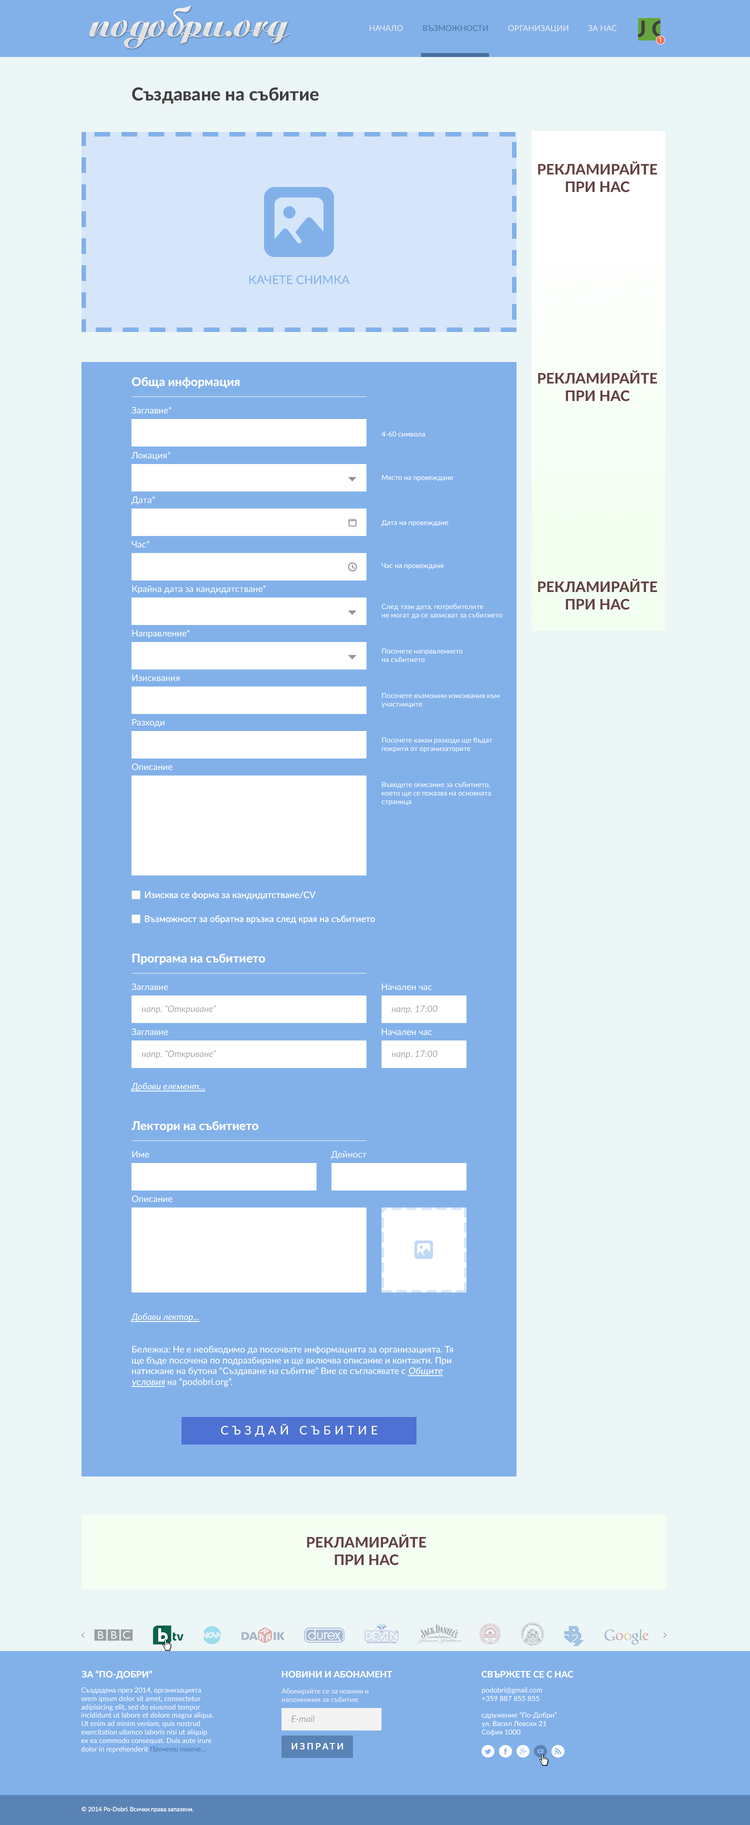
<style>
.page{position:relative;width:750px;height:1825px;background:#edf6f6}
.page>*{position:absolute;margin:0}
.t1{font:22.5px "Lato-Heavy"}
.t2{font:7.7px "ArialMT";color:#ffffff}
.t3{font:18px "Lato-Heavy";color:#404040}
.t4{font:14.5px "Lato-Heavy";color:#654242}
.t5{font:12px "Lato-Medium";color:#82b1ea}
.t6{font:12px "Lato-Heavy";color:#ffffff}
.t7{font:9px "Lato-Regular";color:#ffffff}
.t8{font:7px "Lato-Medium";color:#ffffff}
.t9{font:7px "Lato-Regular";color:#ffffff}
.t10{font:9px "Lato-Medium";color:#ffffff}
.t11{font:9px "Lato-Italic";color:#a6a6a6}
.t12{font:9px "Lato-Italic";color:#ffffff;text-decoration:underline}
.t13{font:9px "Lato-Medium";color:#ffffff;font-style:italic;text-decoration:underline}
.t14{font:12px "Lato-Medium";letter-spacing:0.3em;color:#ffffff}
</style>
<div class="page">
<p class="t1" style="left:631px;top:20px;width:38px;height:17px">U O</p>
<p class="t2" style="left:659px;top:36px;width:2px;height:6px">1</p>
<p class="t3" style="left:132px;top:87px;width:187px;height:17px">Създаване на събитие</p>
<p class="t4" style="left:538px;top:161px;width:119px;height:449px;text-align:center">РЕКЛАМИРАЙТЕ <br>ПРИ НАС<br><br><br><br><br><br><br><br><br><br><br>РЕКЛАМИРАЙТЕ <br>ПРИ НАС<br><br><br><br><br><br><br><br><br><br><br>РЕКЛАМИРАЙТЕ <br>ПРИ НАС</p>
<p class="t5" style="left:249px;top:275px;width:101px;height:9px">КАЧЕТЕ СНИМКА</p>
<p class="t6" style="left:131px;top:377px;width:108px;height:11px">Обща информация</p>
<p class="t7" style="left:131px;top:406px;width:40px;height:8px">Заглавие*</p>
<p class="t8" style="left:381px;top:431px;width:44px;height:5px">4-60 символа</p>
<p class="t7" style="left:131px;top:451px;width:39px;height:9px">Локация*</p>
<p class="t8" style="left:382px;top:475px;width:71px;height:6px">Място на провеждане</p>
<p class="t7" style="left:131px;top:496px;width:24px;height:9px">Дата*</p>
<p class="t8" style="left:381px;top:520px;width:67px;height:6px">Дата на провеждане</p>
<p class="t7" style="left:131px;top:540px;width:18px;height:8px">Час*</p>
<p class="t8" style="left:381px;top:563px;width:63px;height:6px">Час на провеждане</p>
<p class="t7" style="left:132px;top:585px;width:134px;height:9px">Крайна дата за кандидатстване*</p>
<p class="t9" style="left:381px;top:603px;width:121px;height:16px">След тази дата, потребителите<br>не могат да се записват за събитието</p>
<p class="t7" style="left:132px;top:629px;width:58px;height:9px">Направление*</p>
<p class="t9" style="left:382px;top:648px;width:80px;height:14px">Посочете направлението<br>на събитието</p>
<p class="t7" style="left:132px;top:674px;width:47px;height:7px">Изисквания</p>
<p class="t9" style="left:381px;top:693px;width:118px;height:15px">Посочете възможни изисквания към<br>участниците</p>
<p class="t7" style="left:132px;top:719px;width:32px;height:8px">Разходи</p>
<p class="t9" style="left:382px;top:737px;width:110px;height:15px">Посочете какви разходи ще бъдат<br>покрити от организаторите</p>
<p class="t7" style="left:131px;top:763px;width:41px;height:7px">Описание</p>
<p class="t9" style="left:381px;top:782px;width:110px;height:23px">Въведете описание за събитието,<br>което ще се показва на основната <br>страница</p>
<p class="t10" style="left:145px;top:891px;width:170px;height:9px">Изисква се форма за кандидатстване/CV</p>
<p class="t10" style="left:145px;top:915px;width:230px;height:9px">Възможност за обратна връзка след края на събитието</p>
<p class="t6" style="left:132px;top:953px;width:133px;height:11px">Програма на събитието</p>
<p class="t7" style="left:131px;top:983px;width:37px;height:7px">Заглавие</p>
<p class="t7" style="left:381px;top:983px;width:51px;height:7px">Начален час</p>
<p class="t11" style="left:141px;top:1005px;width:75px;height:8px">напр. “Откриване”</p>
<p class="t11" style="left:391px;top:1005px;width:46px;height:8px">напр. 17:00</p>
<p class="t7" style="left:131px;top:1028px;width:37px;height:7px">Заглавие</p>
<p class="t7" style="left:381px;top:1028px;width:51px;height:7px">Начален час</p>
<p class="t11" style="left:141px;top:1050px;width:75px;height:8px">напр. “Откриване”</p>
<p class="t11" style="left:391px;top:1050px;width:46px;height:8px">напр. 17:00</p>
<p class="t12" style="left:131px;top:1082px;width:74px;height:9px">Добави елемент...</p>
<p class="t6" style="left:131px;top:1121px;width:127px;height:11px">Лектори на събитието</p>
<p class="t7" style="left:132px;top:1151px;width:17px;height:6px">Име</p>
<p class="t7" style="left:331px;top:1151px;width:35px;height:8px">Дейност</p>
<p class="t7" style="left:131px;top:1195px;width:41px;height:7px">Описание</p>
<p class="t12" style="left:131px;top:1313px;width:68px;height:9px">Добави лектор...</p>
<p class="t10" style="left:131px;top:1346px;width:322px;height:41px">Бележка: Не е необходимо да посочвате информацията за организацията. Тя ще бъде посочена по подразбиране и ще включва описание и контакти. При натискане на бутона “Създаване на събитие” Вие се съгласявате с <span class="t13">Общите условия</span> на “podobri.org”.</p>
<p class="t14" style="left:221px;top:1423px;width:156px;height:14px">СЪЗДАЙ СЪБИТИЕ</p>
<p class="t4" style="left:307px;top:1534px;width:119px;height:31px;text-align:center">РЕКЛАМИРАЙТЕ <br>ПРИ НАС</p>
</div>
